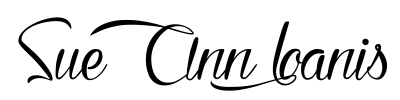
<style>
.page{position:relative;width:400px;height:100px;background:#ffffff}
.page>*{position:absolute;margin:0}
.t1{font:112px "KarineaimelesChocolats";color:#000000}
</style>
<div class="page">
<p class="t1" style="left:18px;top:17px;width:370px;height:74px">Sue Ann Ioanis</p>
</div>
